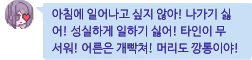
<style>
.page{position:relative;width:252px;height:60px;background:#c9dff6}
.page>*{position:absolute;margin:0}
.t1{font:12px "NanumBarunGothic";color:#3c2d9c}
</style>
<div class="page">
<p class="t1" style="left:52px;top:8px;width:179px;height:12px">아침에 일어나고 싶지 않아! 나가기 싫</p>
<p class="t1" style="left:52px;top:25px;width:174px;height:12px">어! 성실하게 일하기 싫어! 타인이 무</p>
<p class="t1" style="left:52px;top:42px;width:186px;height:12px">서워! 어른은 개빡쳐! 머리도 깡통이야!</p>
</div>
